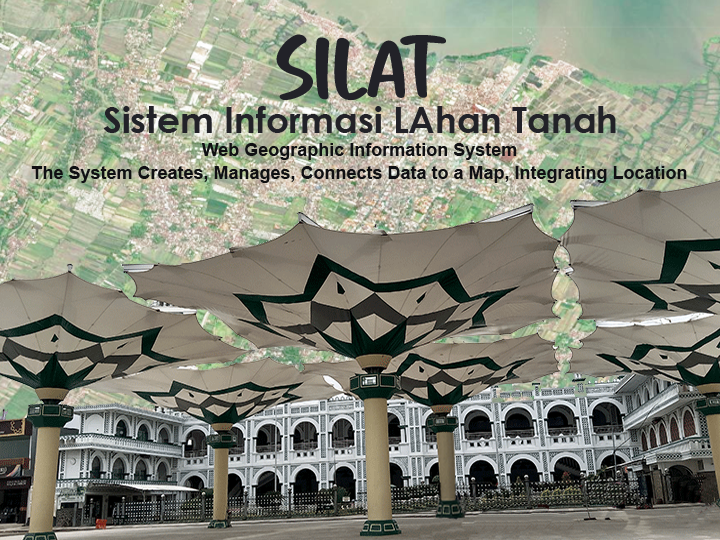
<style>
.page{position:relative;width:720px;height:540px}
.page>*{position:absolute;margin:0}
.t1{font:36.4px/36px "CenturyGothic-Bold";color:#222228}
.t2{font:84.8px/36px "JustBreatheRegular";color:#222228}
.t3{font:18px/23px "Arial-BoldMT";color:#101013}
</style>
<div class="page">
<p class="t1" style="left:103px;top:34px;width:513px;height:99px;text-align:center"><span class="t2">SILAT<br></span>Sistem Informasi LAhan Tanah</p>
<p class="t3" style="left:31px;top:143px;width:656px;height:40px;text-align:center">Web Geographic Information System<br>The System Creates, Manages, Connects Data to a Map, Integrating Location</p>
</div>
